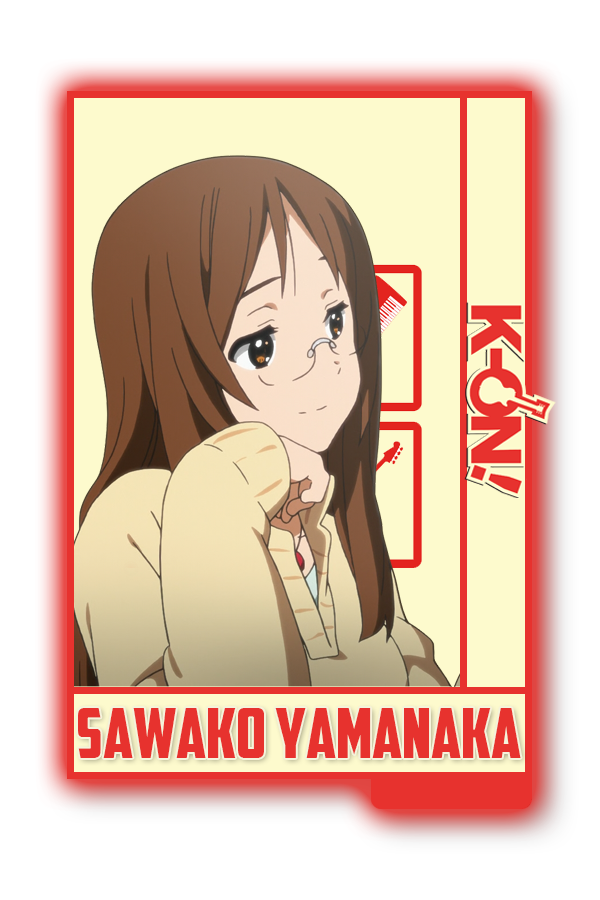
<style>
.page{position:relative;width:600px;height:900px;background:#ffffff}
.page>*{position:absolute;margin:0}
.t1{font:68.7px "AmericanCaptain";color:#e7322e}
</style>
<div class="page">
<p class="t1" style="left:78px;top:708px;width:443px;height:50px">sawako yamanaka</p>
</div>
